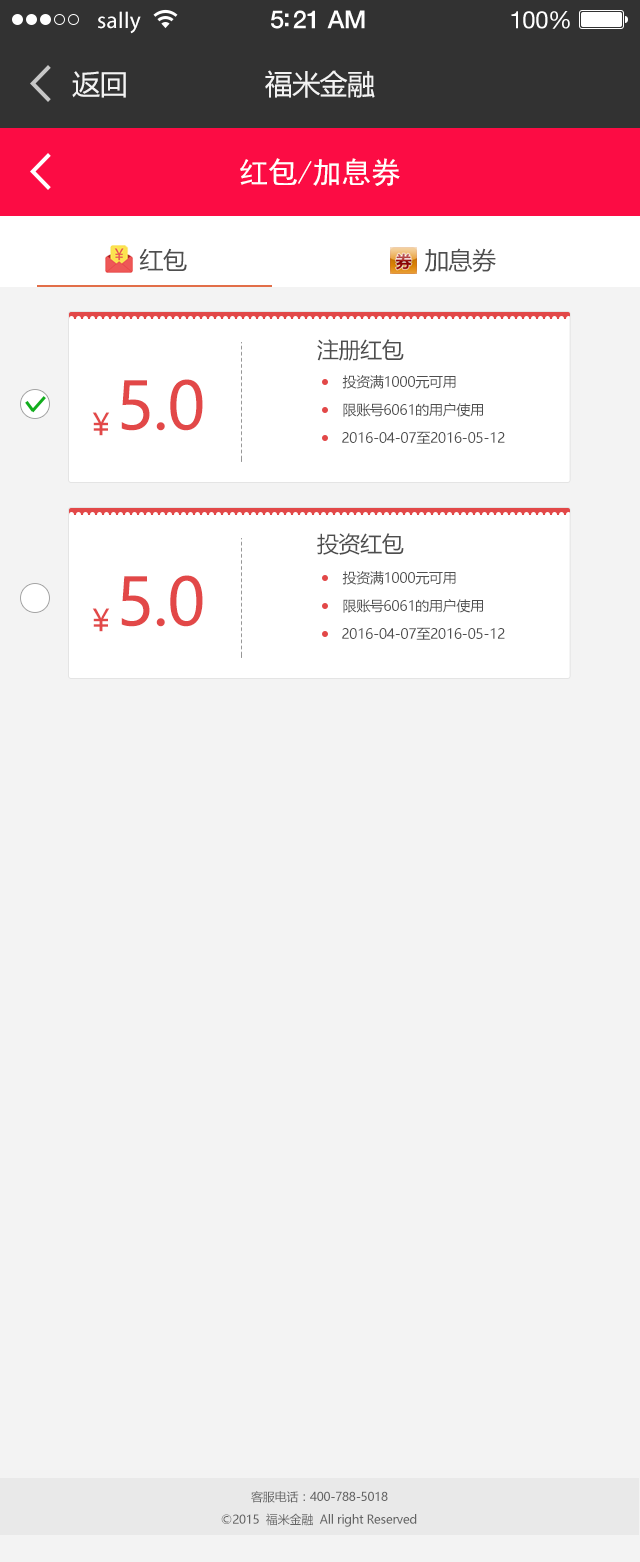
<style>
.page{position:relative;width:640px;height:1562px;background:#f3f3f3}
.page>*{position:absolute;margin:0}
.t1{font:23px "MyriadPro-Regular";letter-spacing:0.02em;color:#ffffff}
.t2{font:25px "HelveticaNeue-Medium";letter-spacing:-0.02em;color:#ffffff}
.t3{font:24px "HelveticaNeue";letter-spacing:-0.02em;color:#ffffff}
.t4{font:28px "MicrosoftYaHei";letter-spacing:-0.02em;color:#f3f3f3}
.t5{font:30px "SimHei";letter-spacing:-0.02em;color:#ffffff}
.t6{font:24px "MicrosoftYaHei";letter-spacing:-0.02em;color:#4e4e4e}
.t7{font:22px "MicrosoftYaHei";letter-spacing:-0.02em;color:#4e4e4e}
.t8{font:14px "MicrosoftYaHei";letter-spacing:-0.02em;color:#4e4e4e}
.t9{font:65px "MicrosoftYaHei";letter-spacing:-0.02em;color:#e24848}
.t10{font:30px "MicrosoftYaHei";letter-spacing:-0.02em;color:#e24848}
.t11{font:12px "MicrosoftYaHei";letter-spacing:-0.02em;color:#646464}
</style>
<div class="page">
<p class="t1" style="left:98px;top:11px;width:43px;height:23px">sally</p>
<p class="t2" style="left:271px;top:10px;width:94px;height:19px">5:21 AM</p>
<p class="t3" style="left:511px;top:11px;width:59px;height:18px">100%</p>
<p class="t4" style="left:72px;top:71px;width:54px;height:27px">返回</p>
<p class="t4" style="left:265px;top:70px;width:110px;height:28px">福米金融</p>
<p class="t5" style="left:240px;top:158px;width:160px;height:28px">红包/加息券</p>
<p class="t6" style="left:139px;top:248px;width:357px;height:25px">红包                                    加息券</p>
<p class="t7" style="left:317px;top:339px;width:87px;height:22px">注册红包</p>
<p class="t8" style="left:342px;top:375px;width:114px;height:14px">投资满1000元可用</p>
<p class="t9" style="left:121px;top:379px;width:82px;height:52px">5.0</p>
<p class="t10" style="left:92px;top:412px;width:18px;height:24px">￥</p>
<p class="t8" style="left:343px;top:403px;width:140px;height:14px">限账号6061的用户使用</p>
<p class="t8" style="left:342px;top:431px;width:163px;height:13px">2016-04-07至2016-05-12</p>
<p class="t7" style="left:317px;top:533px;width:87px;height:22px">投资红包</p>
<p class="t9" style="left:121px;top:575px;width:82px;height:52px">5.0</p>
<p class="t8" style="left:342px;top:571px;width:114px;height:14px">投资满1000元可用</p>
<p class="t8" style="left:343px;top:599px;width:140px;height:14px">限账号6061的用户使用</p>
<p class="t10" style="left:92px;top:608px;width:18px;height:24px">￥</p>
<p class="t8" style="left:342px;top:627px;width:163px;height:13px">2016-04-07至2016-05-12</p>
<p class="t11" style="left:251px;top:1491px;width:137px;height:12px">客服电话：400-788-5018</p>
<p class="t11" style="left:221px;top:1513px;width:196px;height:14px">©2015  福米金融  All right Reserved</p>
</div>
